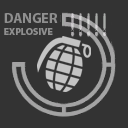
<style>
.page{position:relative;width:128px;height:128px;background:#333333}
.page>*{position:absolute;margin:0}
.t1{font:10px "MyriadPro-Bold";color:#8f8f8f}
.t2{font:14px "MyriadPro-Bold";color:#8f8f8f}
</style>
<div class="page">
<p class="t1" style="left:4px;top:13px;width:54px;height:22px"><span class="t2">DANGER<br></span>EXPLOSIVE</p>
</div>
